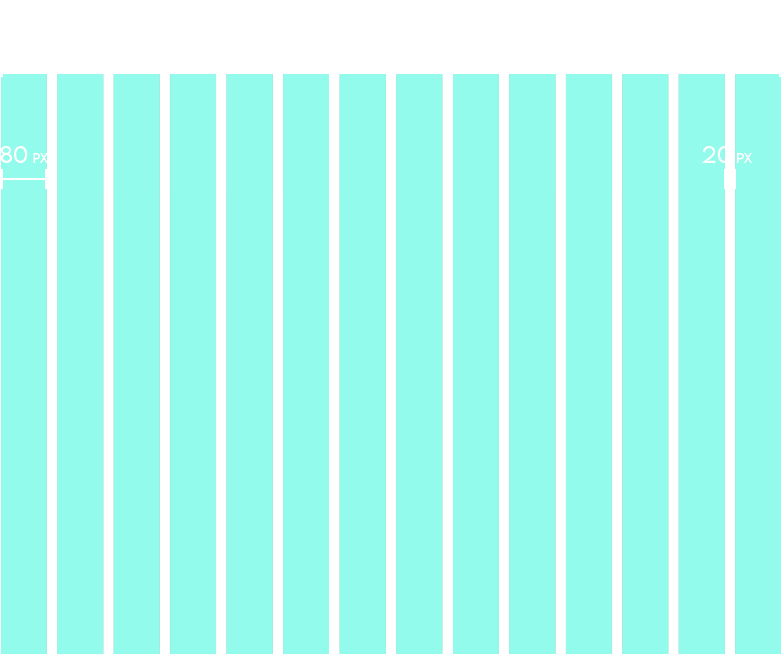
<style>
.page{position:relative;width:781px;height:654px;background:#93fbeb}
.page>*{position:absolute;margin:0}
.t1{font:21px "LEMONMILK-Light";letter-spacing:0.05em;color:#ffffff}
.t2{font:12px "LEMONMILK-Light";letter-spacing:0.05em;color:#ffffff}
</style>
<div class="page">
<p class="t1" style="left:0px;top:146px;width:48px;height:17px">80 <span class="t2">px</span></p>
<p class="t1" style="left:702px;top:146px;width:50px;height:17px">20 <span class="t2">px</span></p>
</div>
